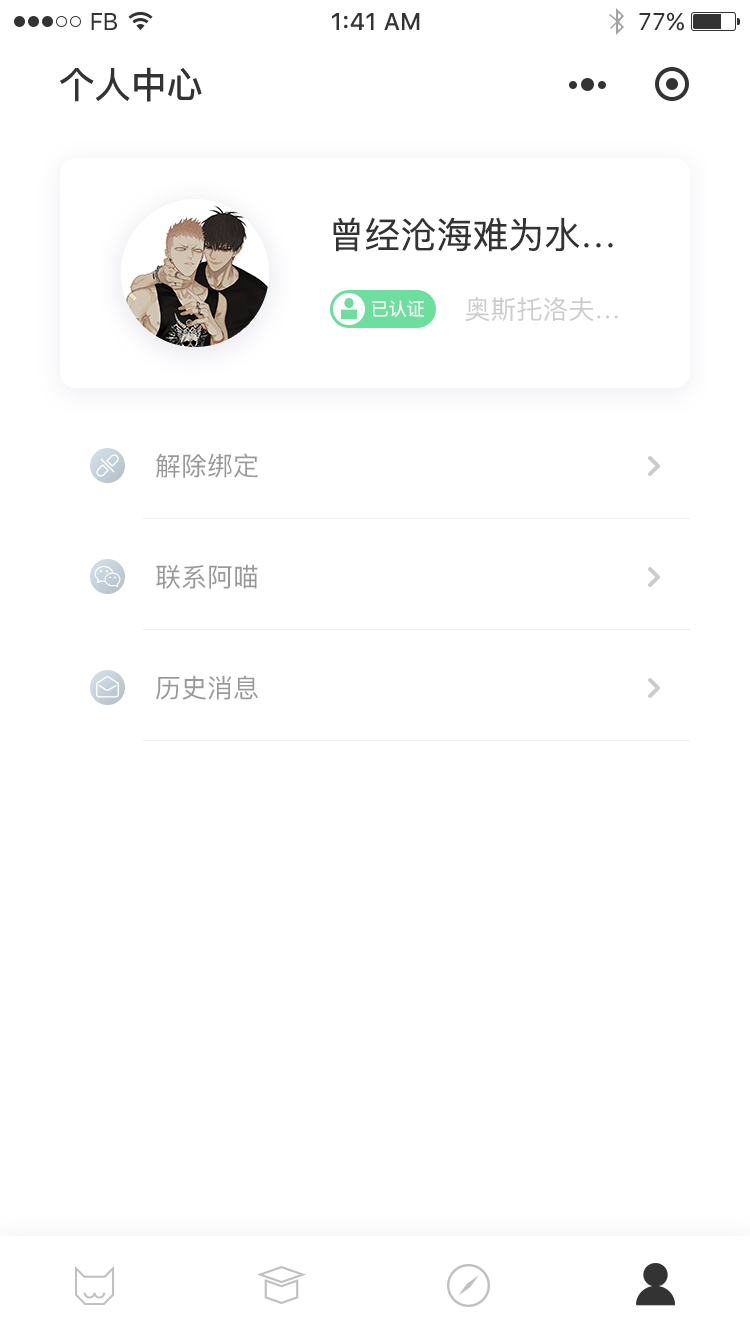
<style>
.page{position:relative;width:750px;height:1334px;background:#ffffff}
.page>*{position:absolute;margin:0}
.t1{font:24px "SFUIText-Regular";letter-spacing:-0.025em;color:#333333}
.t2{font:24px "SFUIText-Medium";color:#333333}
.t3{font:24px "SFUIText-Regular";color:#333333}
.t4{font:36px "PingFangSC-Medium";color:#333333}
.t5{font:36px "PingFangSC-Regular";color:#333333}
.t6{font:18px "PingFangSC-Regular";color:#ffffff}
.t7{font:26px "PingFangSC-Regular";color:#cccccc}
.t8{font:26px "PingFangSC-Regular";color:#999999}
</style>
<div class="page">
<p class="t1" style="left:91px;top:13px;width:26px;height:17px">FB</p>
<p class="t2" style="left:332px;top:13px;width:88px;height:17px">1:41 AM</p>
<p class="t3" style="left:639px;top:12px;width:45px;height:19px">77%</p>
<p class="t4" style="left:60px;top:67px;width:142px;height:35px">个人中心</p>
<p class="t5" style="left:333px;top:217px;width:280px;height:35px">曾经沧海难为水…</p>
<p class="t6" style="left:372px;top:300px;width:52px;height:17px">已认证</p>
<p class="t7" style="left:465px;top:297px;width:153px;height:25px">奥斯托洛夫…</p>
<p class="t8" style="left:156px;top:453px;width:102px;height:25px">解除绑定</p>
<p class="t8" style="left:156px;top:564px;width:102px;height:25px">联系阿喵</p>
<p class="t8" style="left:156px;top:675px;width:102px;height:25px">历史消息</p>
</div>
